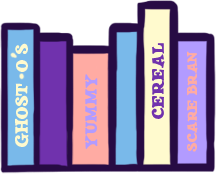
<style>
.page{position:relative;width:216px;height:174px}
.page>*{position:absolute;margin:0}
.t1{font:13.7px "JMHSALOON-Regular";color:#ffface}
.t2{font:13.3px "JMHSALOON-Regular";color:#7032ad}
.t3{font:13.3px "JMHSALOON-Regular";color:#b29bff}
</style>
<div class="page">
<p class="t1" style="left:15px;top:43px;width:14px;height:104px;rotate:-90deg">Ghost  O s</p>
<p class="t2" style="left:151px;top:43px;width:14px;height:76px;rotate:-90deg">Cereal</p>
<p class="t3" style="left:85px;top:74px;width:13px;height:75px;rotate:-90deg">Yummy</p>
</div>
